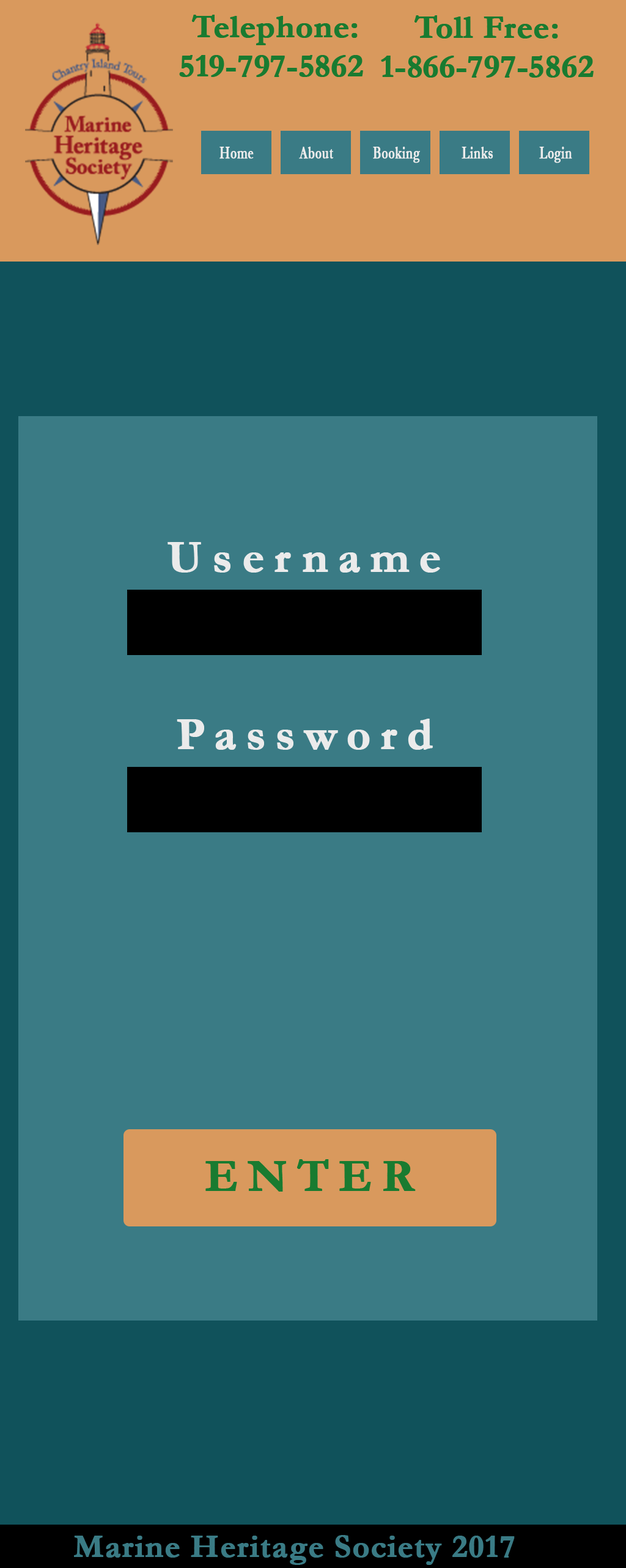
<style>
.page{position:relative;width:626px;height:1568px;background:#3a7b85}
.page>*{position:absolute;margin:0}
.t1{font:32.7px "Garamond-Bold";letter-spacing:-0.01em;color:#197b30;font-weight:bold}
.t2{font:32.7px "Garamond-Bold";color:#197b30;font-weight:bold}
.t3{font:17.5px "Garamond-Bold";color:#ebebeb;font-weight:bold;scale:0.69 1}
.t4{font:45.8px "Garamond-Bold";letter-spacing:0.2em;color:#ebebeb;font-weight:bold}
.t5{font:45.8px "Garamond-Bold";letter-spacing:0.2em;color:#197b30;font-weight:bold}
.t6{font:32.7px "Garamond-Bold";color:#3a7b85;font-weight:bold}
</style>
<div class="page">
<p class="t1" style="left:179px;top:15px;width:184px;height:62px;text-align:center"><span class="t2">Telephone:<br></span>519-797-5862</p>
<p class="t1" style="left:381px;top:15px;width:212px;height:63px;text-align:center"><span class="t2">Toll Free:<br></span>1-866-797-5862</p>
<p class="t3" style="left:219px;top:147px;width:35px;height:12px">Home</p>
<p class="t3" style="left:299px;top:147px;width:34px;height:12px">About</p>
<p class="t3" style="left:373px;top:147px;width:47px;height:16px">Booking</p>
<p class="t3" style="left:461px;top:147px;width:32px;height:12px">Links</p>
<p class="t3" style="left:539px;top:147px;width:33px;height:16px">Login</p>
<p class="t4" style="left:167px;top:542px;width:273px;height:31px">Username</p>
<p class="t4" style="left:177px;top:719px;width:256px;height:31px">Password</p>
<p class="t5" style="left:205px;top:1159px;width:211px;height:33px">ENTER</p>
<p class="t6" style="left:74px;top:1535px;width:441px;height:30px">Marine Heritage Society 2017</p>
</div>
